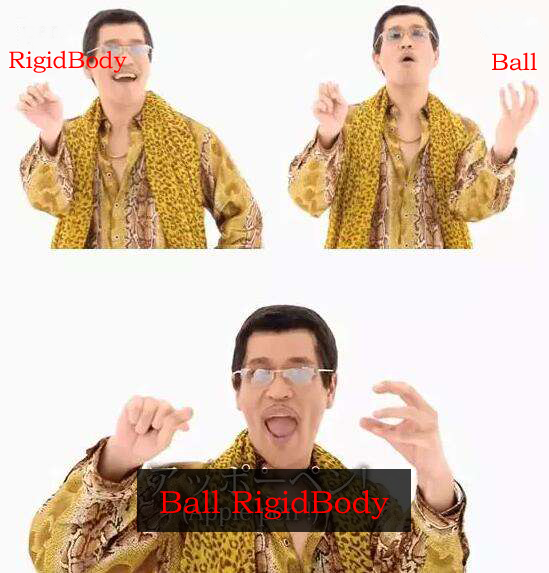
<style>
.page{position:relative;width:549px;height:573px;background:#fafafa}
.page>*{position:absolute;margin:0}
.t1{font:24px "STZhongsong";color:#ff0000}
.t2{font:32px "STZhongsong";color:#ff0000}
</style>
<div class="page">
<p class="t1" style="left:9px;top:50px;width:118px;height:23px">RigidBody</p>
<p class="t1" style="left:492px;top:52px;width:45px;height:19px">Ball</p>
<p class="t2" style="left:160px;top:490px;width:229px;height:30px">Ball RigidBody</p>
</div>
